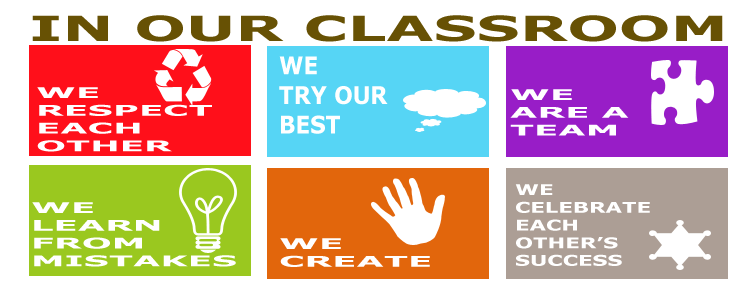
<style>
.page{position:relative;width:750px;height:300px;background:#ffffff}
.page>*{position:absolute;margin:0}
.t1{font:34.8px "Verdana-Bold";color:#675104;scale:1.75 1}
.t2{font:24.6px "Verdana-Bold";color:#ffffff;scale:0.88 1}
.t3{font:14.8px "Verdana-Bold";color:#ffffff;scale:2.4 1}
.t4{font:14.8px "Verdana-Bold";color:#ffffff;scale:1.44 1}
</style>
<div class="page">
<p class="t1" style="left:32px;top:15px;width:691px;height:27px">IN OUR CLASSROOM</p>
<p class="t2" style="left:279px;top:56px;width:109px;height:78px">WE <br>TRY OUR <br>BEST</p>
<p class="t3" style="left:37px;top:87px;width:175px;height:65px">WE <br>RESPECT<br>EACH<br>OTHER</p>
<p class="t3" style="left:510px;top:89px;width:119px;height:47px">WE <br>ARE A <br>TEAM</p>
<p class="t4" style="left:515px;top:184px;width:135px;height:82px">WE  <br>CELEBRATE<br>EACH <br>OTHER’S <br>SUCCESS</p>
<p class="t3" style="left:32px;top:202px;width:204px;height:65px">WE <br>LEARN <br>FROM <br>MISTAKES</p>
<p class="t3" style="left:280px;top:238px;width:150px;height:29px">WE <br>CREATE</p>
</div>
